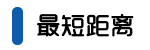
<style>
.page{position:relative;width:150px;height:50px;background:#ffffff}
.page>*{position:absolute;margin:0}
.t1{font:24px "RTWSYueRoudGoDemo-Regular";color:#000000;font-weight:bold}
</style>
<div class="page">
<p class="t1" style="left:37px;top:14px;width:97px;height:23px">最短距离</p>
</div>
